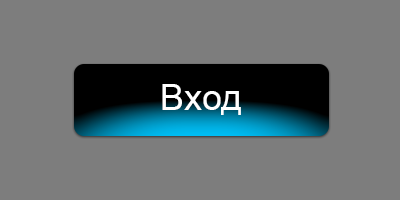
<style>
.page{position:relative;width:400px;height:200px;background:#7d7d7d}
.page>*{position:absolute;margin:0}
.t1{font:36px "ArialMT";color:#ffffff}
</style>
<div class="page">
<p class="t1" style="left:162px;top:84px;width:79px;height:31px">Вход</p>
</div>
